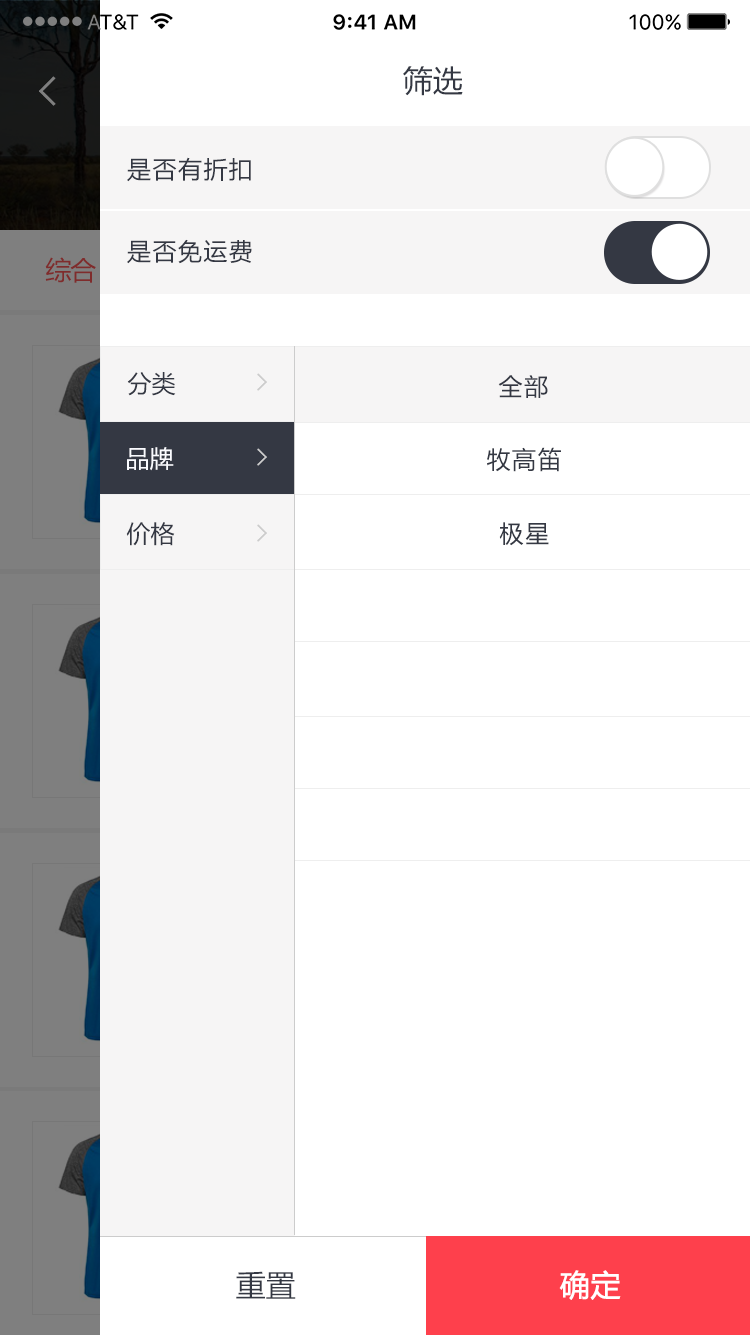
<style>
.page{position:relative;width:750px;height:1335px;background:#ffffff}
.page>*{position:absolute;margin:0}
.t1{font:30px "MicrosoftYaHei";color:#343843}
.t2{font:24px "MicrosoftYaHei";letter-spacing:0.06em;color:#343843}
.t3{font:24px "MicrosoftYaHei";color:#343843}
.t4{font:24px "MicrosoftYaHei";color:#f9fbff}
.t5{font:30px "MicrosoftYaHei";color:#ffffff;font-weight:bold}
</style>
<div class="page">
<p class="t1" style="left:403px;top:66px;width:60px;height:30px">筛选</p>
<p class="t2" style="left:127px;top:157px;width:124px;height:25px">是否有折扣</p>
<p class="t2" style="left:127px;top:239px;width:125px;height:25px">是否免运费</p>
<p class="t3" style="left:127px;top:372px;width:49px;height:24px">分类</p>
<p class="t2" style="left:498px;top:375px;width:50px;height:23px">全部</p>
<p class="t4" style="left:127px;top:447px;width:47px;height:24px">品牌</p>
<p class="t2" style="left:487px;top:447px;width:74px;height:25px">牧高笛</p>
<p class="t3" style="left:126px;top:522px;width:49px;height:24px">价格</p>
<p class="t2" style="left:499px;top:522px;width:50px;height:24px">极星</p>
<p class="t1" style="left:236px;top:1271px;width:60px;height:28px">重置</p>
<p class="t5" style="left:559px;top:1270px;width:62px;height:30px">确定</p>
</div>
